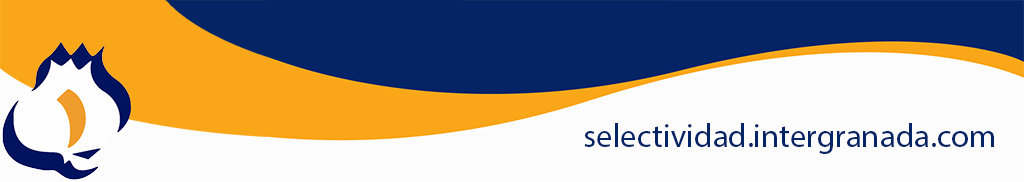
<style>
.page{position:relative;width:1024px;height:182px;background:#fcfcfc}
.page>*{position:absolute;margin:0}
.t1{font:32.9px "MyriadPro-Regular";color:#052466}
</style>
<div class="page">
<p class="t1" style="left:584px;top:123px;width:410px;height:31px">selectividad.intergranada.com</p>
</div>
